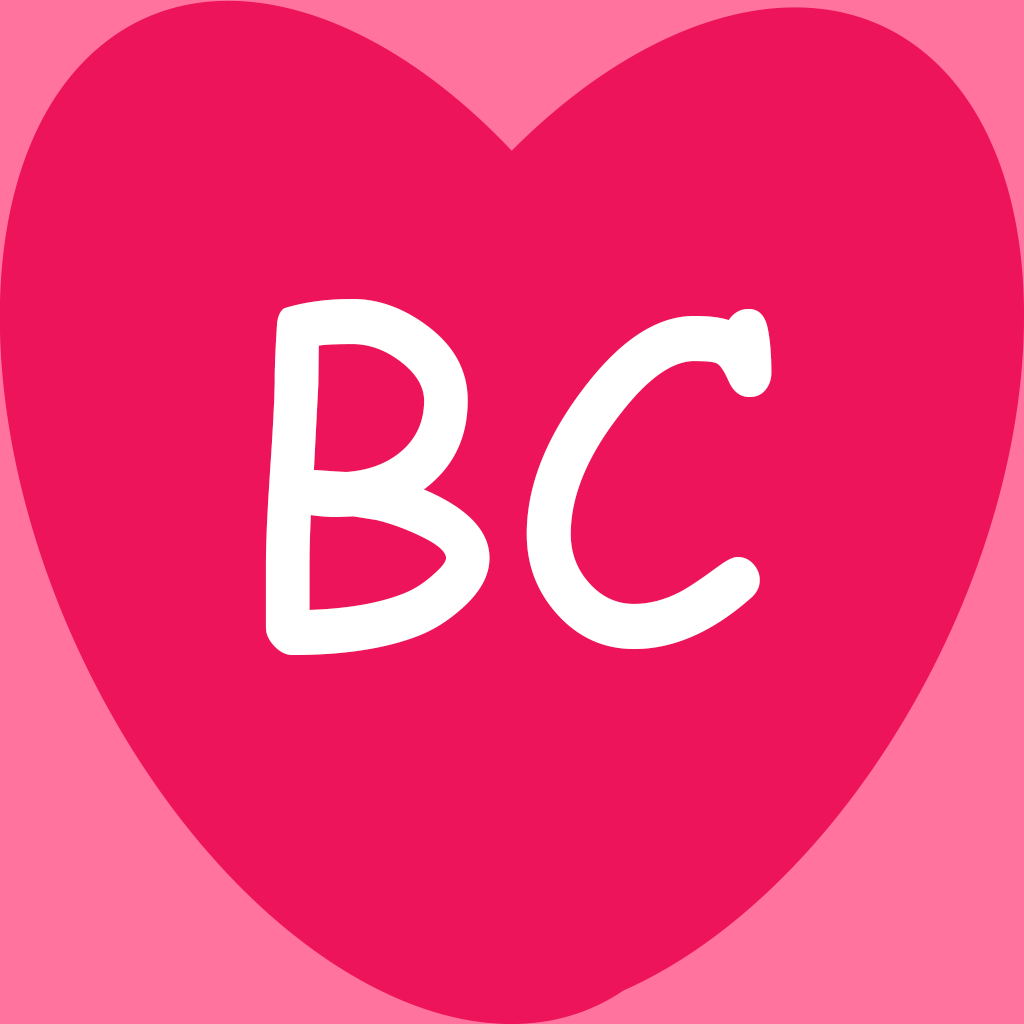
<style>
.page{position:relative;width:1024px;height:1024px;background:#ed145b}
.page>*{position:absolute;margin:0}
.t1{font:450px "ComicSansMS";color:#ffffff}
</style>
<div class="page">
<p class="t1" style="left:265px;top:299px;width:507px;height:356px">BC</p>
</div>
